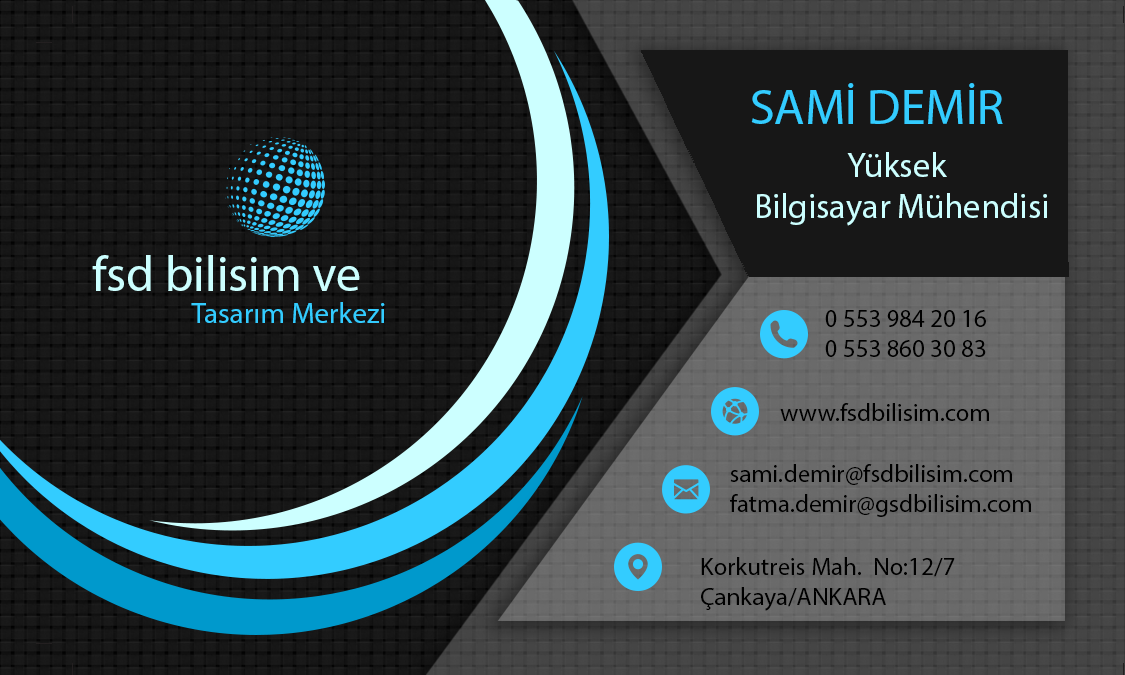
<style>
.page{position:relative;width:1125px;height:675px}
.page>*{position:absolute;margin:0}
.t1{font:50px "MyriadPro-Regular";color:#33ccff}
.t2{font:34.6px "MyriadPro-Regular";color:#ccffff}
.t3{font:50px "MyriadPro-Regular";color:#ccffff}
.t4{font:29.2px "MyriadPro-Regular";color:#33ccff}
.t5{font:25px "MyriadPro-Regular";color:#000000}
</style>
<div class="page">
<p class="t1" style="left:751px;top:83px;width:252px;height:41px">SAMİ DEMİR</p>
<p class="t2" style="left:757px;top:152px;width:290px;height:74px">Yüksek <br>Bilgisayar Mühendisi</p>
<p class="t3" style="left:92px;top:255px;width:268px;height:36px">fsd bilisim ve</p>
<p class="t4" style="left:191px;top:302px;width:194px;height:21px">Tasarım Merkezi</p>
<p class="t5" style="left:825px;top:310px;width:161px;height:47px">0 553 984 20 16<br>0 553 860 30 83</p>
<p class="t5" style="left:780px;top:403px;width:209px;height:18px">www.fsdbilisim.com</p>
<p class="t5" style="left:730px;top:464px;width:301px;height:53px">sami.demir@fsdbilisim.com<br>fatma.demir@gsdbilisim.com</p>
<p class="t5" style="left:701px;top:557px;width:254px;height:54px">Korkutreis Mah.  No:12/7<br>Çankaya/ANKARA</p>
</div>
